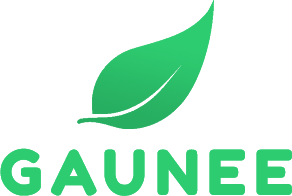
<style>
.page{position:relative;width:292px;height:196px;background:#ffffff}
.page>*{position:absolute;margin:0}
.t1{font:62px "FredokaOne-Regular";letter-spacing:0.12em;color:#2ecc71}
</style>
<div class="page">
<p class="t1" style="left:0px;top:148px;width:292px;height:48px">GAUNEE</p>
</div>
